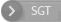
<style>
.page{position:relative;width:61px;height:22px;background:#a4a4a4}
.page>*{position:absolute;margin:0}
.t1{font:12px "MyriadPro-Regular";color:#e5e3e3}
</style>
<div class="page">
<p class="t1" style="left:31px;top:6px;width:20px;height:9px">SGT</p>
</div>
